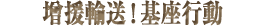
<style>
.page{position:relative;width:265px;height:26px;background:#ffffff}
.page>*{position:absolute;margin:0}
.t1{font:26px "RyuminPr6N-ExBold";font-weight:bold;scale:0.79 1}
</style>
<div class="page">
<p class="t1" style="left:42px;top:0px;width:181px;height:26px">增援輸送！基座行動</p>
</div>
